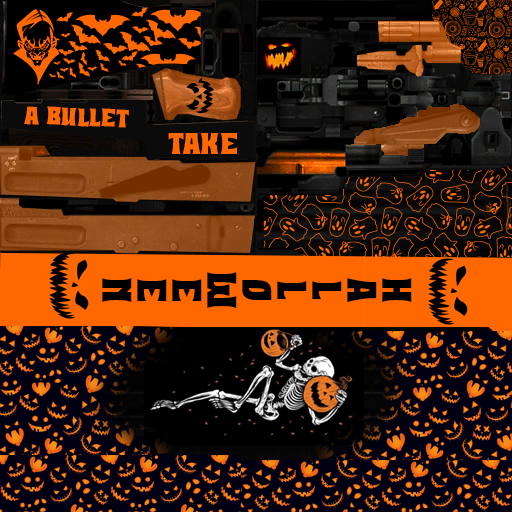
<style>
.page{position:relative;width:512px;height:512px}
.page>*{position:absolute;margin:0}
.t1{font:27.5px "HalloweenHex";color:#ff6800}
.t2{font:33.3px "HalloweenHex";color:#ff6800}
.t3{font:45.4px/35px "HalloweenHex";color:#000000}
</style>
<div class="page">
<p class="t1" style="left:24px;top:106px;width:105px;height:22px;rotate:2deg">A bullet</p>
<p class="t2" style="left:168px;top:133px;width:69px;height:21px">TAke</p>
<p class="t3" style="left:102px;top:272px;width:310px;height:36px;text-align:center;rotate:90deg">H<br>A<br>L<br>L<br>O<br>W<br>E<br>E<br>N</p>
</div>
